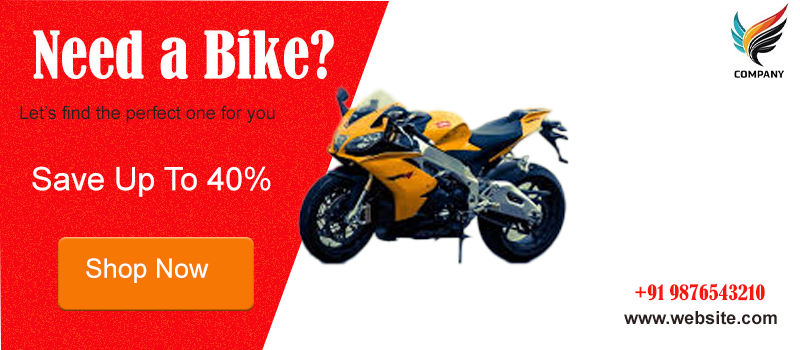
<style>
.page{position:relative;width:800px;height:350px;background:#ffffff}
.page>*{position:absolute;margin:0}
.t1{font:60.7px "BernardMT-Condensed";color:#ffffff}
.t2{font:18px "ArialMT";color:#2b1f1f}
.t3{font:32.4px "ArialMT";color:#ffffff}
.t4{font:26.7px "ArialMT";color:#ffffff}
.t5{font:20px "BernardMT-Condensed";color:#f6180e}
.t6{font:18px "Arial-BoldMT";color:#2b1f1f}
</style>
<div class="page">
<p class="t1" style="left:33px;top:29px;width:301px;height:50px">Need a Bike?</p>
<p class="t2" style="left:20px;top:105px;width:255px;height:18px">Let’s find the perfect one for you</p>
<p class="t3" style="left:32px;top:166px;width:239px;height:31px">Save Up To 40%</p>
<p class="t4" style="left:86px;top:258px;width:123px;height:25px">Shop Now</p>
<p class="t5" style="left:635px;top:283px;width:130px;height:18px">+91 9876543210</p>
<p class="t6" style="left:624px;top:311px;width:153px;height:14px">www.website.com</p>
</div>
